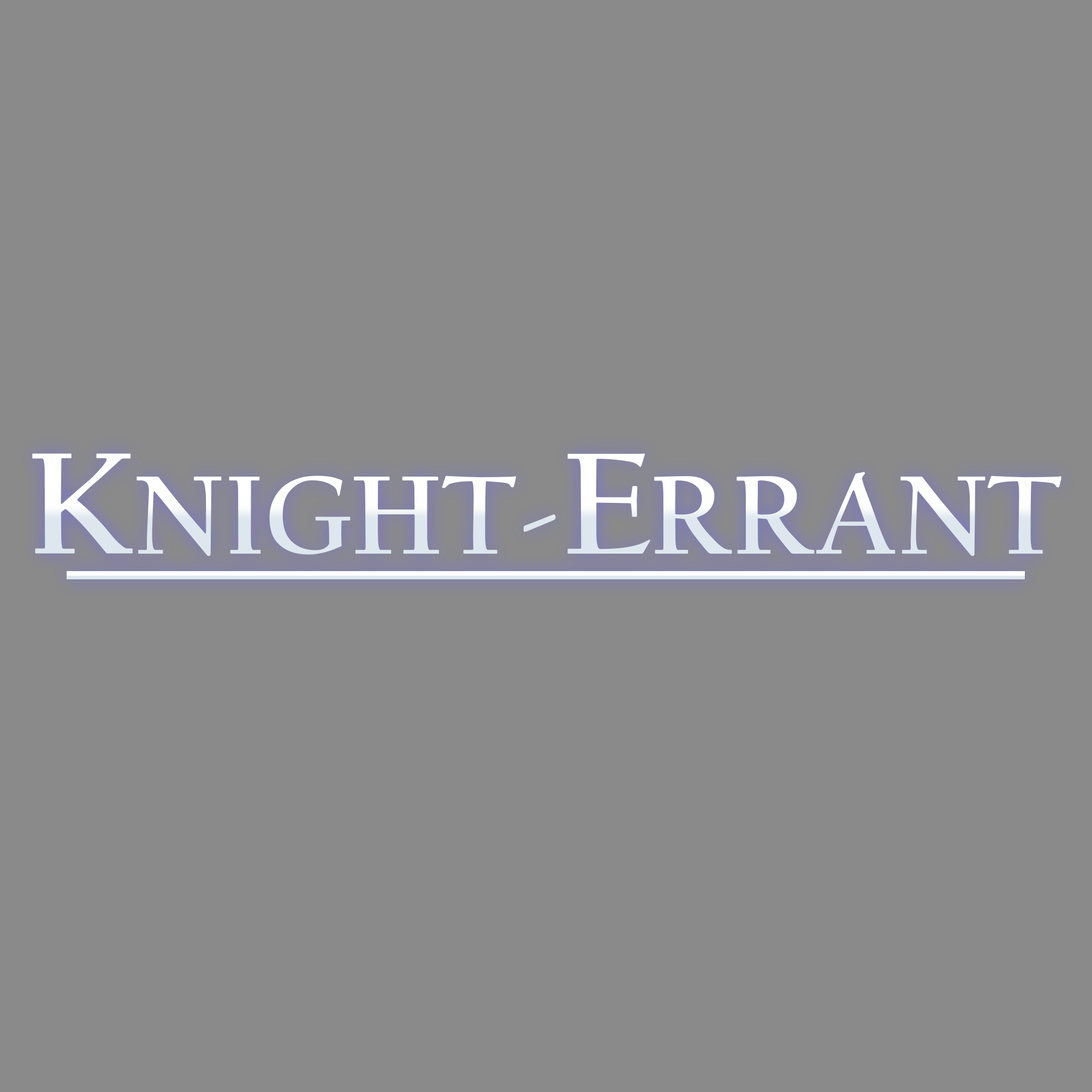
<style>
.page{position:relative;width:1092px;height:1092px;background:#8a8a8a}
.page>*{position:absolute;margin:0}
.t1{font:116.4px "CalifornianFB-Bold";color:#ebf1f5}
.t2{font:150.7px "CalifornianFB-Bold";color:#ebf1f5}
</style>
<div class="page">
<p class="t1" style="left:32px;top:453px;width:1029px;height:103px"><span class="t2">K</span>NIGHT-<span class="t2">E</span>RRANT</p>
</div>
